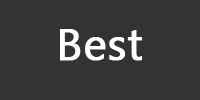
<style>
.page{position:relative;width:200px;height:100px;background:#333333}
.page>*{position:absolute;margin:0}
.t1{font:44.5px "SegoeUI";color:#ffffff;font-weight:bold}
</style>
<div class="page">
<p class="t1" style="left:60px;top:29px;width:82px;height:32px">Best</p>
</div>
